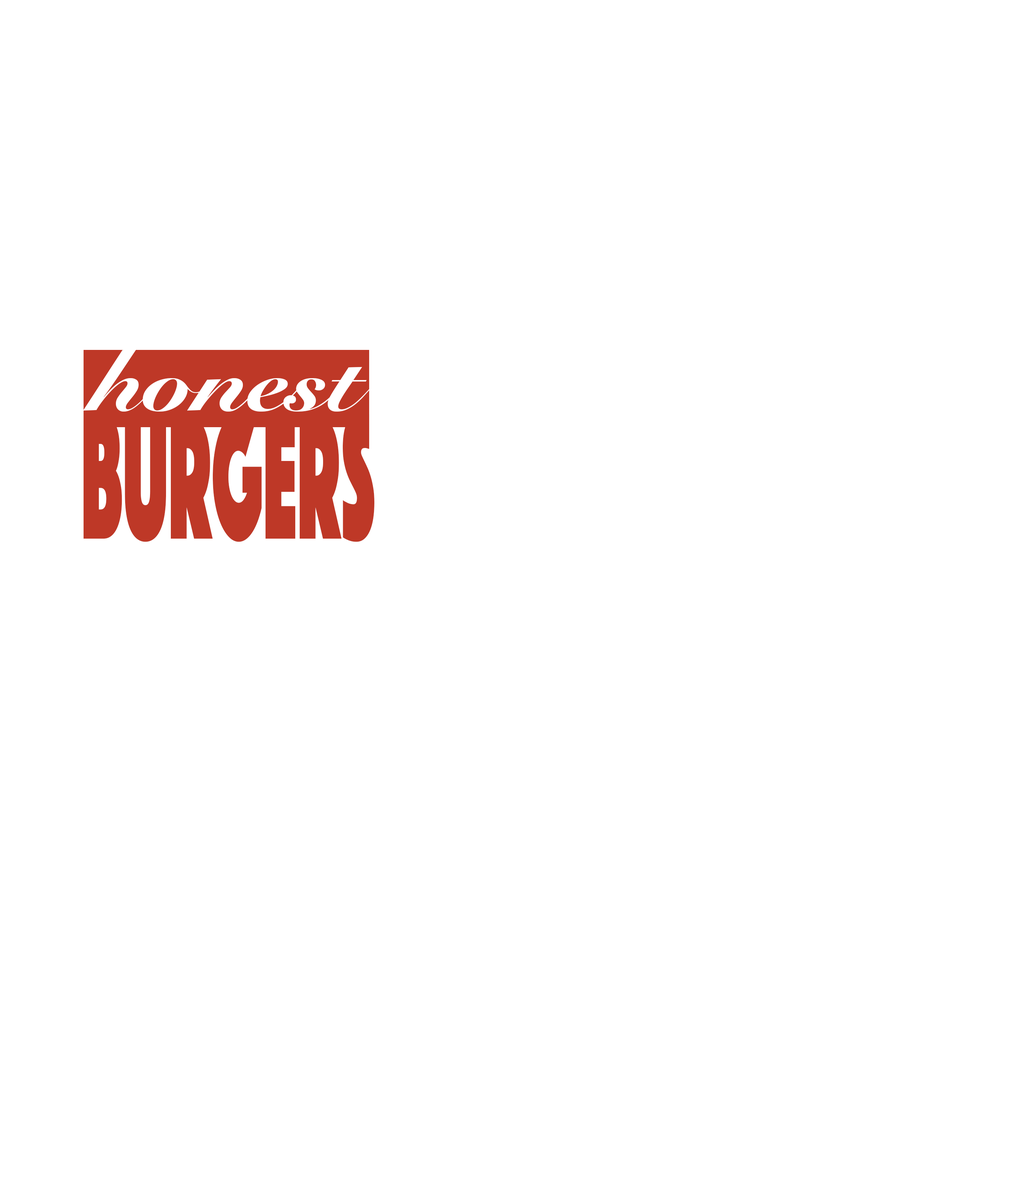
<style>
.page{position:relative;width:1012px;height:1179px;background:#ffffff}
.page>*{position:absolute;margin:0}
.t1{font:86.9px "SnellRoundhand-Black";color:#ffffff;scale:1.12 1}
.t2{font:185.7px "Phosphate-Solid";color:#be3827;scale:0.4 1}
</style>
<div class="page">
<p class="t1" style="left:83px;top:349px;width:289px;height:62px">honest</p>
<p class="t2" style="left:84px;top:411px;width:290px;height:131px">BURGERS</p>
</div>
